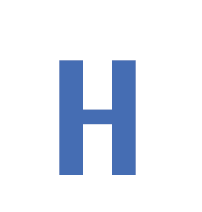
<style>
.page{position:relative;width:202px;height:212px;background:#ffffff}
.page>*{position:absolute;margin:0}
.t1{font:160.9px "DINEngschrift";color:#456db3;scale:1.44 1}
</style>
<div class="page">
<p class="t1" style="left:59px;top:45px;width:77px;height:115px">H</p>
<p class="t1" style="left:59px;top:60px;width:77px;height:115px">H</p>
</div>
